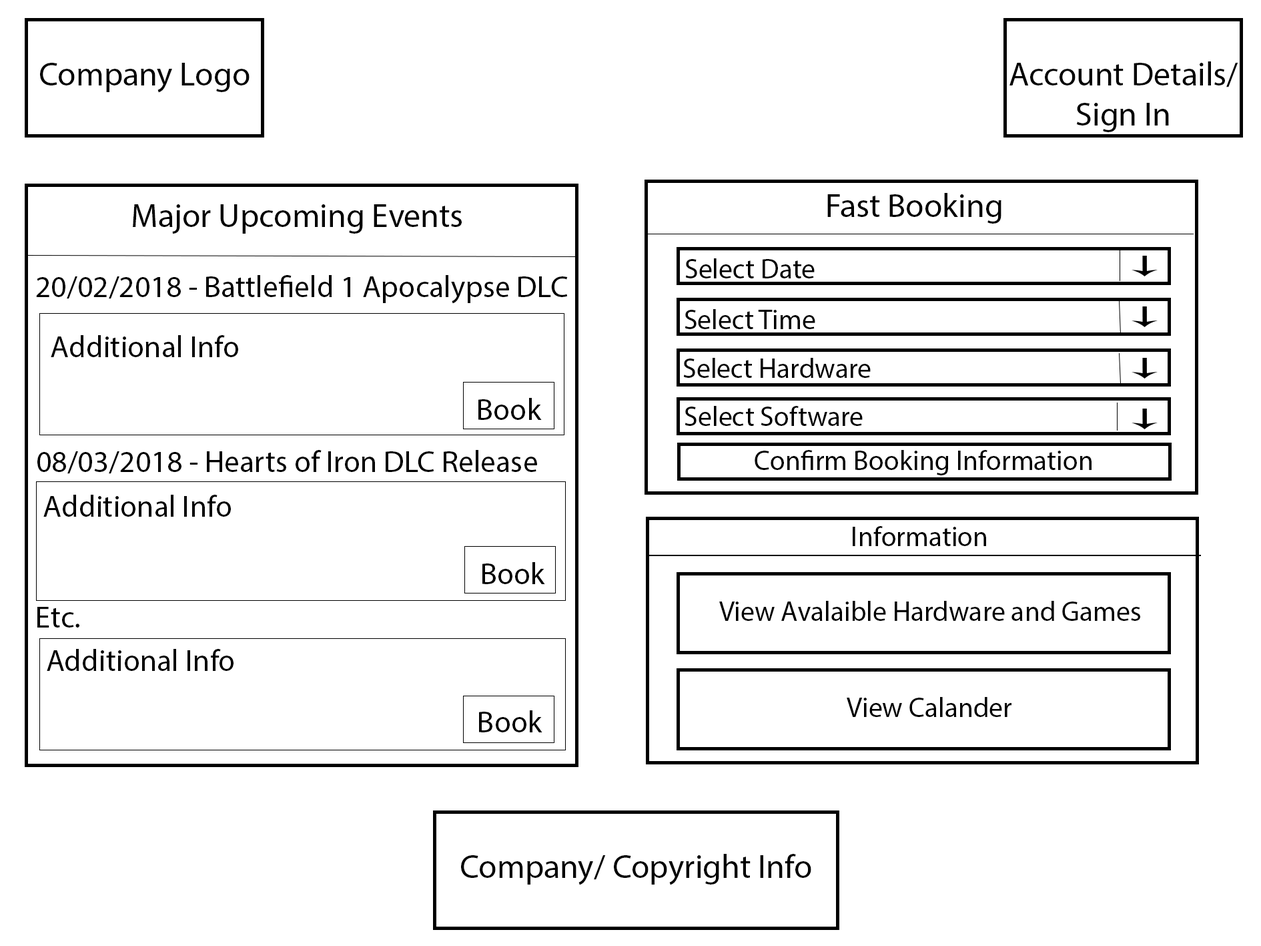
<style>
.page{position:relative;width:1261px;height:946px;background:#ffffff}
.page>*{position:absolute;margin:0}
.t1{font:33.4px "MyriadPro-Regular";color:#000000}
.t2{font:38.9px "MyriadPro-Regular";color:#000000}
.t3{font:8px "MyriadPro-Regular";color:#000000}
.t4{font:27.8px "MyriadPro-Regular";color:#000000}
.t5{font:30.6px "MyriadPro-Regular";color:#000000}
</style>
<div class="page">
<p class="t1" style="left:40px;top:63px;width:210px;height:30px"><span class="t2"><br></span>Company Logo</p>
<p class="t1" style="left:1010px;top:61px;width:228px;height:71px;text-align:center"><span class="t2"><br></span>Account Details/ Sign In</p>
<p class="t3" style="left:827px;top:193px;width:175px;height:31px;text-align:center">Fast Booking</p>
<p class="t3" style="left:133px;top:204px;width:329px;height:30px;text-align:center">Major Upcoming Events</p>
<p class="t4" style="left:685px;top:258px;width:130px;height:20px">Select Date</p>
<p class="t5" style="left:36px;top:275px;width:532px;height:29px">20/02/2018 - Battlefield 1 Apocalypse DLC</p>
<p class="t4" style="left:685px;top:309px;width:130px;height:20px">Select Time</p>
<p class="t5" style="left:51px;top:335px;width:187px;height:22px">Additional Info</p>
<p class="t4" style="left:683px;top:358px;width:188px;height:20px">Select Hardware</p>
<p class="t5" style="left:478px;top:398px;width:64px;height:22px">Book</p>
<p class="t4" style="left:685px;top:406px;width:178px;height:20px">Select Software</p>
<p class="t5" style="left:37px;top:450px;width:500px;height:24px">08/03/2018 - Hearts of Iron DLC Release</p>
<p class="t4" style="left:755px;top:450px;width:337px;height:25px">Confirm Booking Information</p>
<p class="t5" style="left:43px;top:494px;width:188px;height:22px">Additional Info</p>
<p class="t4" style="left:853px;top:526px;width:133px;height:20px">Information</p>
<p class="t5" style="left:482px;top:562px;width:63px;height:22px">Book</p>
<p class="t4" style="left:719px;top:601px;width:421px;height:20px">View Avalaible Hardware and Games</p>
<p class="t5" style="left:37px;top:607px;width:42px;height:20px">Etc.</p>
<p class="t5" style="left:47px;top:649px;width:187px;height:22px">Additional Info</p>
<p class="t4" style="left:847px;top:697px;width:165px;height:20px">View Calander</p>
<p class="t5" style="left:479px;top:710px;width:63px;height:22px">Book</p>
<p class="t1" style="left:461px;top:853px;width:350px;height:32px"><span class="t2"><br></span>Company/ Copyright Info</p>
</div>
